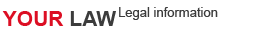
<style>
.page{position:relative;width:279px;height:37px;background:#ffffff}
.page>*{position:absolute;margin:0}
.t1{font:21px "Arial-BoldMT";color:#dc0e23}
.t2{font:21px "Arial-BoldMT";color:#3c3c3c}
.t3{font:13px "ArialMT";color:#3c3c3c}
</style>
<div class="page">
<p class="t1" style="left:2px;top:11px;width:114px;height:15px">YOUR <span class="t2">LAW</span></p>
<p class="t3" style="left:119px;top:7px;width:99px;height:13px">Legal information</p>
</div>
